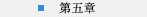
<style>
.page{position:relative;width:147px;height:17px;background:#f1f1f1}
.page>*{position:absolute;margin:0}
.t1{font:12px "SimSun";color:#000000;font-weight:bold}
</style>
<div class="page">
<p class="t1" style="left:39px;top:0px;width:77px;height:17px">第五章</p>
</div>
